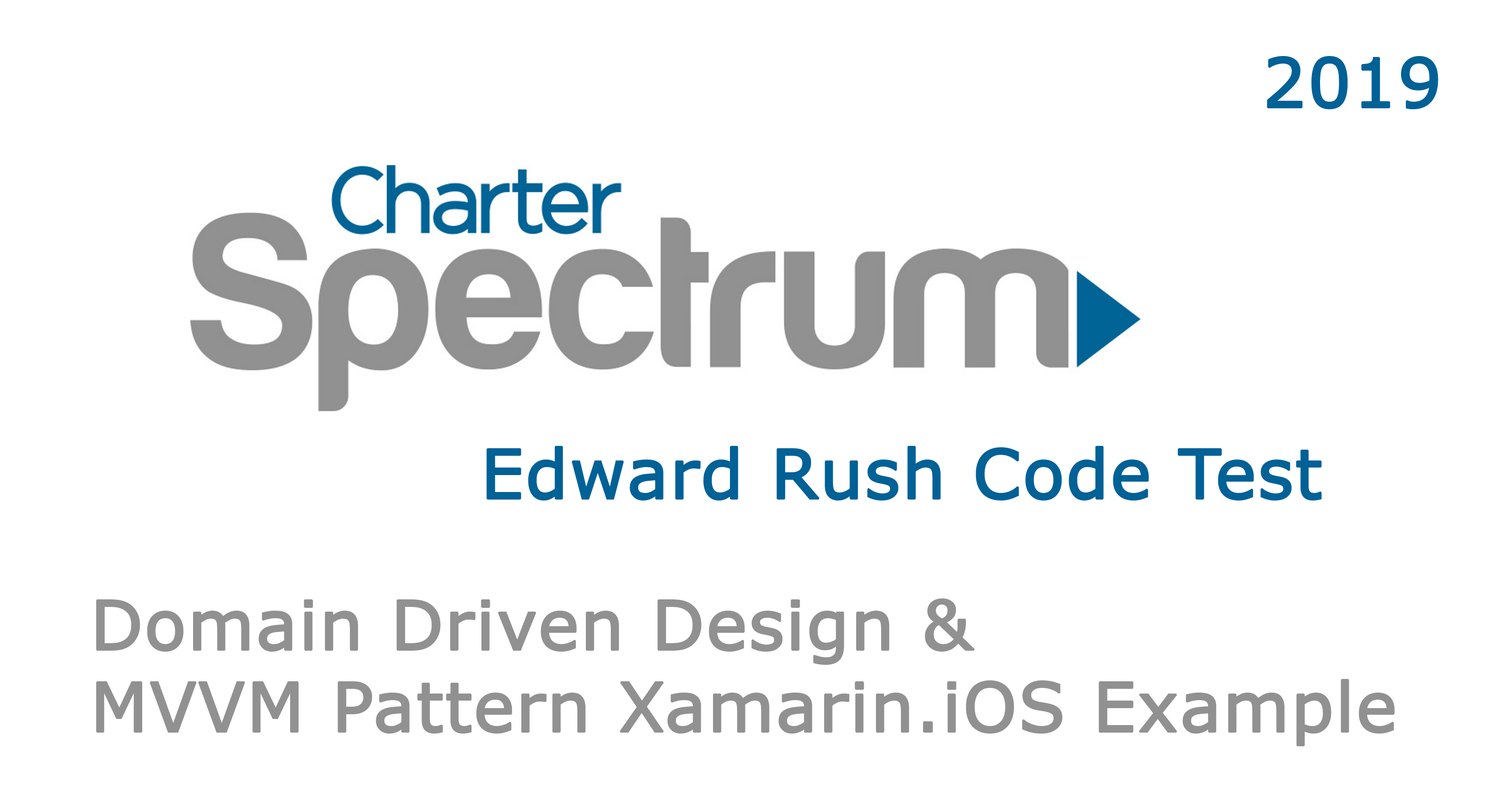
<style>
.page{position:relative;width:1507px;height:791px;background:#ffffff}
.page>*{position:absolute;margin:0}
.t1{font:68.3px "Verdana";color:#006197;font-weight:bold}
.t2{font:68.3px "Verdana";color:#919191;font-weight:bold}
</style>
<div class="page">
<p class="t1" style="left:1267px;top:56px;width:171px;height:53px">2019</p>
<p class="t1" style="left:487px;top:446px;width:835px;height:55px">Edward Rush Code Test</p>
<p class="t2" style="left:96px;top:599px;width:1299px;height:147px">Domain Driven Design &amp;<br>MVVM Pattern Xamarin.iOS Example</p>
</div>
